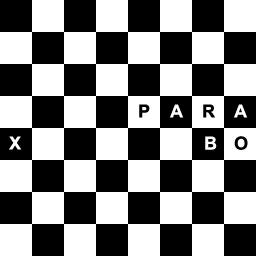
<style>
.page{position:relative;width:256px;height:256px;background:#ffffff}
.page>*{position:absolute;margin:0}
.t1{font:18px "Arial-BoldMT";color:#000000}
.t2{font:18px "Arial-BoldMT";color:#ffffff}
</style>
<div class="page">
<p class="t1" style="left:139px;top:104px;width:11px;height:14px">P</p>
<p class="t2" style="left:170px;top:104px;width:14px;height:14px">A</p>
<p class="t1" style="left:203px;top:104px;width:12px;height:14px">R</p>
<p class="t2" style="left:234px;top:104px;width:14px;height:14px">A</p>
<p class="t2" style="left:9px;top:136px;width:13px;height:14px">X</p>
<p class="t2" style="left:205px;top:136px;width:12px;height:14px">B</p>
<p class="t1" style="left:234px;top:136px;width:14px;height:14px">O</p>
</div>
